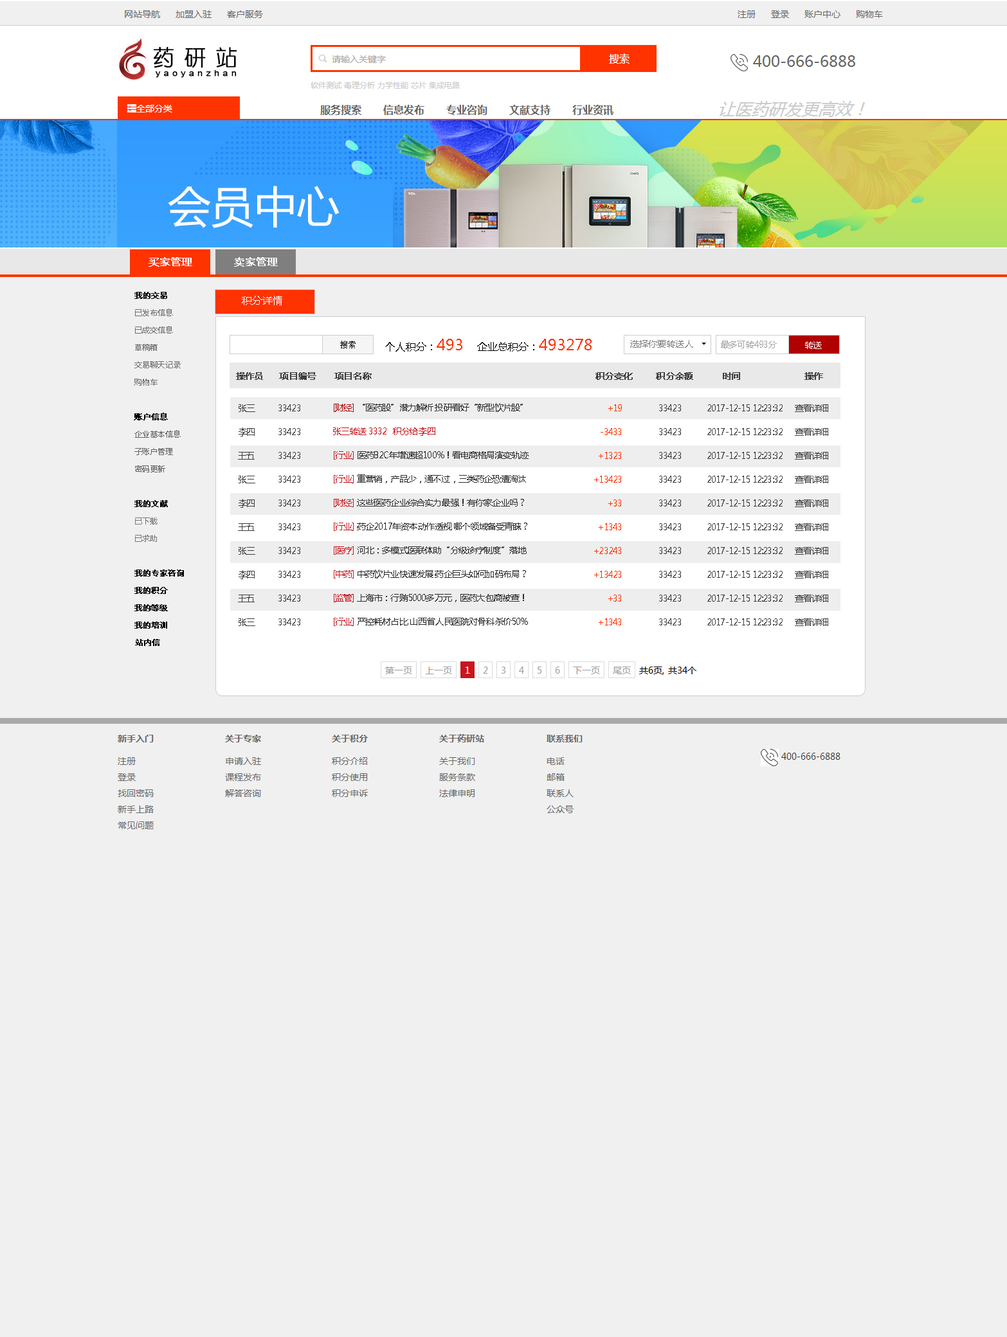
<style>
.page{position:relative;width:1007px;height:1337px;background:#f0f0f0}
.page>*{position:absolute;margin:0}
.t1{font:10.3px "MicrosoftYaHei";color:#ffffff;font-weight:bold}
.t2{font:7.7px/17.4px "MicrosoftYaHei";color:#6e6c6c}
.t3{font:7.7px/17.4px "MicrosoftYaHei";color:#000000}
.t4{font:7.7px/17.4px "MicrosoftYaHei";color:#000000;font-weight:bold}
.t5{font:7.7px/17.4px "MicrosoftYaHei";color:#636363}
.t6{font:7.7px/17.4px "MicrosoftYaHei";color:#777777}
.t7{font:7.7px/17.4px "MicrosoftYaHei";color:#010101;font-weight:bold}
.t8{font:10.3px "MicrosoftYaHei";color:#ffffff}
.t9{font:10.3px "MicrosoftYaHei";color:#000000}
.t10{font:15.4px "MicrosoftYaHei";color:#ff3300}
.t11{font:9px "MicrosoftYaHei";color:#7e7e7e}
.t12{font:9px "MicrosoftYaHei";letter-spacing:-0.06em;color:#a3a3a3}
.t13{font:9px "MicrosoftYaHei";letter-spacing:-0.06em;color:#ffffff}
.t14{font:9px "MicrosoftYaHei";letter-spacing:-0.06em;color:#3d3d3d;font-weight:bold}
.t15{font:9px/23.8px "MicrosoftYaHei";letter-spacing:-0.06em;color:#3d3d3d}
.t16{font:9px/23.8px "MicrosoftYaHei";letter-spacing:-0.06em;color:#2d2c2c}
.t17{font:9px/23.8px "MicrosoftYaHei";letter-spacing:-0.06em;color:#a70505}
.t18{font:9px/23.8px "MicrosoftYaHei";letter-spacing:-0.06em;color:#c8161d}
.t19{font:9px/23.8px "MicrosoftYaHei";letter-spacing:-0.06em;color:#ff3300}
</style>
<div class="page">
<p class="t1" style="left:148px;top:257px;width:44px;height:10px">买家管理</p>
<p class="t1" style="left:234px;top:257px;width:44px;height:10px">卖家管理</p>
<p class="t2" style="left:134px;top:292px;width:50px;height:354px"><span class="t3">    </span><span class="t4">我的交易<br>    </span>已发布信息<br>    已成交信息<br>    草稿箱<br>    交易聊天记录<br>    购物车<br><br>    <span class="t4">账户信息<br>    </span><span class="t5">企业基本信息<br>    子账户管理<br>    密码更新<br><br>    </span><span class="t4">我的文献<br>    </span><span class="t6">已下载<br>    已求助<br><br>    </span><span class="t4">我的专家咨询<br>    </span><span class="t7">我的积分<br>    我的等级<br>    我的培训<br>   </span><span class="t4"> 站内信</span></p>
<p class="t8" style="left:242px;top:296px;width:40px;height:9px">积分详情</p>
<p class="t9" style="left:385px;top:339px;width:206px;height:13px">个人积分：<span class="t10">493   </span>企业总积分：<span class="t10">493278</span></p>
<p class="t11" style="left:630px;top:340px;width:63px;height:8px">选择你要转送人</p>
<p class="t12" style="left:721px;top:341px;width:56px;height:7px">最多可转493分</p>
<p class="t13" style="left:805px;top:341px;width:17px;height:8px">转送</p>
<p class="t14" style="left:236px;top:372px;width:587px;height:8px">操作员      项目编号       项目名称                                                                                    积分变化         积分余额           时间                        操作</p>
<p class="t15" style="left:238px;top:404px;width:17px;height:222px">张三<br>李四<br>王五<br>张三<br>李四<br>王五<br>张三<br>李四<br>王五<br>张三</p>
<p class="t15" style="left:278px;top:404px;width:22px;height:222px">33423<br>33423<br>33423<br>33423<br>33423<br>33423<br>33423<br>33423<br>33423<br>33423</p>
<p class="t16" style="left:333px;top:403px;width:195px;height:223px"><span class="t17">[财经]</span> “医药股”潜力解析 投研看好“新型饮片股”<br><span class="t18">张三转送 3332   积分给李四<br>[行业]</span> 医药B2C年增速超100%！看电商格局演变轨迹<br><span class="t18">[行业]</span> 重营销，产品少，通不过，三类药企恐遭淘汰<br><span class="t18">[财经] </span>这些医药企业综合实力最强！有你家企业吗？<br><span class="t18">[行业]</span> 药企2017年资本动作透视 哪个领域备受青睐？<br><span class="t18">[医疗]</span> 河北：多模式医联体助“分级诊疗制度”落地<br><span class="t18">[中药] </span>中药饮片业快速发展 药企巨头如何加码布局？<br><span class="t18">[监管] </span>上海市：行贿5000多万元，医药大包商被查！<br><span class="t18">[行业]</span> 严控耗材占比 山西省人民医院对骨科杀价50%</p>
<p class="t19" style="left:594px;top:404px;width:28px;height:222px;text-align:right">+19<br>-3433<br>+1323<br>+13423<br>+33<br>+1343<br>+23243<br>+13423<br>+33<br>+1343</p>
<p class="t15" style="left:659px;top:404px;width:22px;height:222px">33423<br>33423<br>33423<br>33423<br>33423<br>33423<br>33423<br>33423<br>33423<br>33423</p>
<p class="t15" style="left:707px;top:404px;width:75px;height:222px">2017-12-15 12:23:32<br>2017-12-15 12:23:32<br>2017-12-15 12:23:32<br>2017-12-15 12:23:32<br>2017-12-15 12:23:32<br>2017-12-15 12:23:32<br>2017-12-15 12:23:32<br>2017-12-15 12:23:32<br>2017-12-15 12:23:32<br>2017-12-15 12:23:32</p>
<p class="t15" style="left:795px;top:404px;width:33px;height:222px">查看详细<br>查看详细<br>查看详细<br>查看详细<br>查看详细<br>查看详细<br>查看详细<br>查看详细<br>查看详细<br>查看详细</p>
</div>
